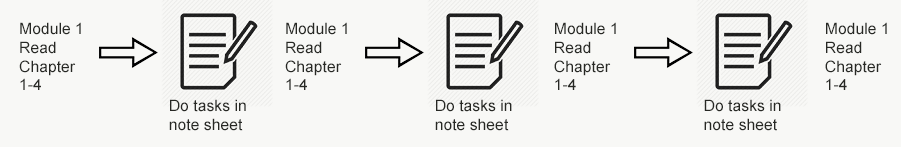
<style>
.page{position:relative;width:901px;height:147px;background:#f8f8f6}
.page>*{position:absolute;margin:0}
.t1{font:15.8px "ArialMT";color:#272824}
</style>
<div class="page">
<p class="t1" style="left:19px;top:22px;width:62px;height:68px">Module 1 <br>Read <br>Chapter <br>1-4</p>
<p class="t1" style="left:285px;top:22px;width:62px;height:68px">Module 1 <br>Read <br>Chapter <br>1-4</p>
<p class="t1" style="left:554px;top:22px;width:62px;height:68px">Module 1 <br>Read <br>Chapter <br>1-4</p>
<p class="t1" style="left:825px;top:22px;width:62px;height:68px">Module 1 <br>Read <br>Chapter <br>1-4</p>
<p class="t1" style="left:169px;top:99px;width:77px;height:32px">Do tasks in <br>note sheet</p>
<p class="t1" style="left:435px;top:99px;width:77px;height:32px">Do tasks in <br>note sheet</p>
<p class="t1" style="left:704px;top:99px;width:77px;height:32px">Do tasks in <br>note sheet</p>
</div>
